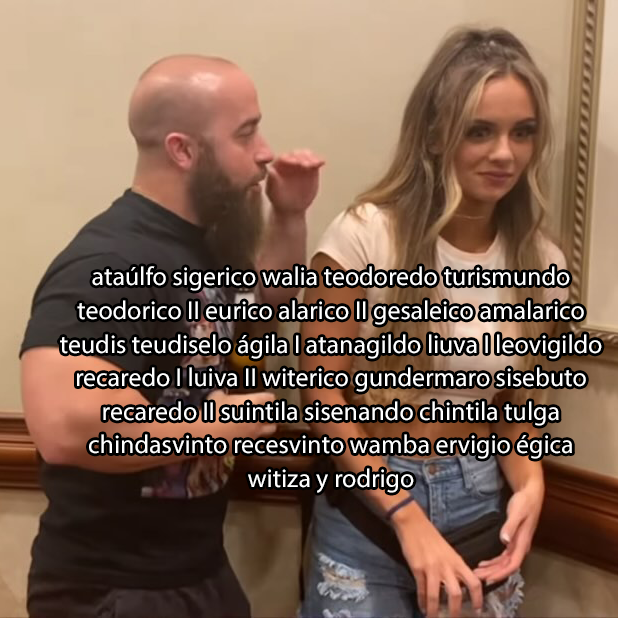
<style>
.page{position:relative;width:618px;height:618px}
.page>*{position:absolute;margin:0}
.t1{font:25.9px "MyriadPro-Regular";color:#ffffff}
</style>
<div class="page">
<p class="t1" style="left:60px;top:266px;width:542px;height:227px;text-align:center">ataúlfo sigerico walia teodoredo turismundo<br>teodorico II eurico alarico II gesaleico amalarico<br>teudis teudiselo ágila I atanagildo liuva I leovigildo<br>recaredo I luiva II witerico gundermaro sisebuto<br>recaredo II suintila sisenando chintila tulga<br>chindasvinto recesvinto wamba ervigio égica<br>witiza y rodrigo</p>
</div>
